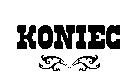
<style>
.page{position:relative;width:138px;height:83px;background:#ffffff}
.page>*{position:absolute;margin:0}
.t1{font:30px "Regulators";color:#000000}
.t2{font:36px "RioGrande-Bold";color:#000000}
</style>
<div class="page">
<p class="t1" style="left:17px;top:25px;width:103px;height:24px">KONIEC</p>
<p class="t2" style="left:39px;top:55px;width:61px;height:16px">()</p>
</div>
